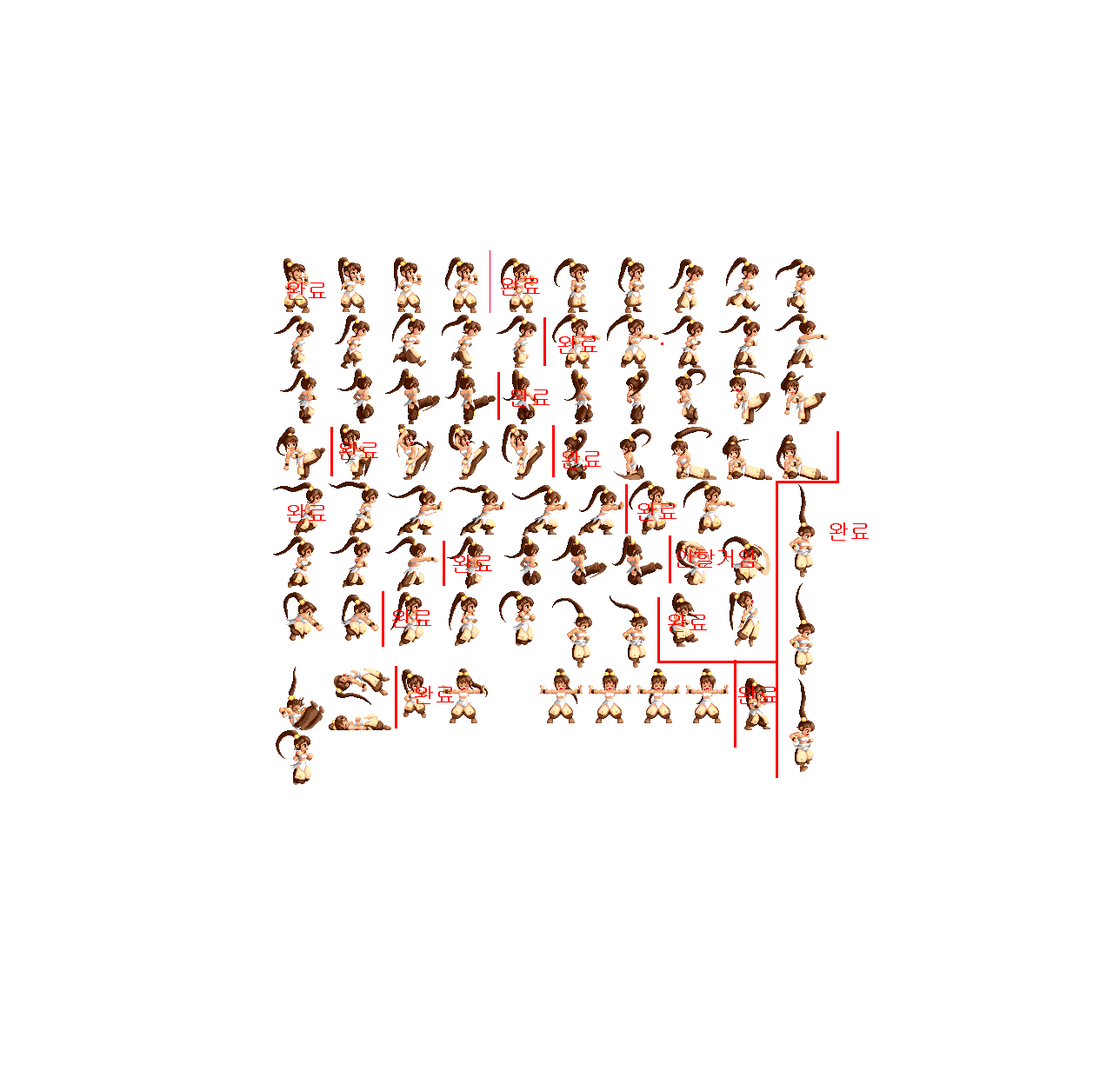
<style>
.page{position:relative;width:1113px;height:1071px;background:#ffffff}
.page>*{position:absolute;margin:0}
.t1{font:20.9px "Gulim";color:#ff0000}
</style>
<div class="page">
<p class="t1" style="left:287px;top:282px;width:39px;height:18px">완료</p>
<p class="t1" style="left:501px;top:277px;width:39px;height:19px">완료</p>
<p class="t1" style="left:558px;top:336px;width:39px;height:18px">완료</p>
<p class="t1" style="left:510px;top:389px;width:40px;height:18px">완료</p>
<p class="t1" style="left:339px;top:442px;width:39px;height:18px">완료</p>
<p class="t1" style="left:562px;top:450px;width:39px;height:19px">완료</p>
<p class="t1" style="left:287px;top:504px;width:39px;height:19px">완료</p>
<p class="t1" style="left:637px;top:503px;width:40px;height:18px">완료</p>
<p class="t1" style="left:830px;top:523px;width:39px;height:18px">완료</p>
<p class="t1" style="left:453px;top:555px;width:39px;height:18px">완료</p>
<p class="t1" style="left:677px;top:550px;width:77px;height:18px">안할거임</p>
<p class="t1" style="left:392px;top:610px;width:39px;height:18px">완료</p>
<p class="t1" style="left:668px;top:614px;width:39px;height:18px">완료</p>
<p class="t1" style="left:415px;top:686px;width:39px;height:18px">완료</p>
<p class="t1" style="left:738px;top:686px;width:39px;height:18px">완료</p>
</div>
